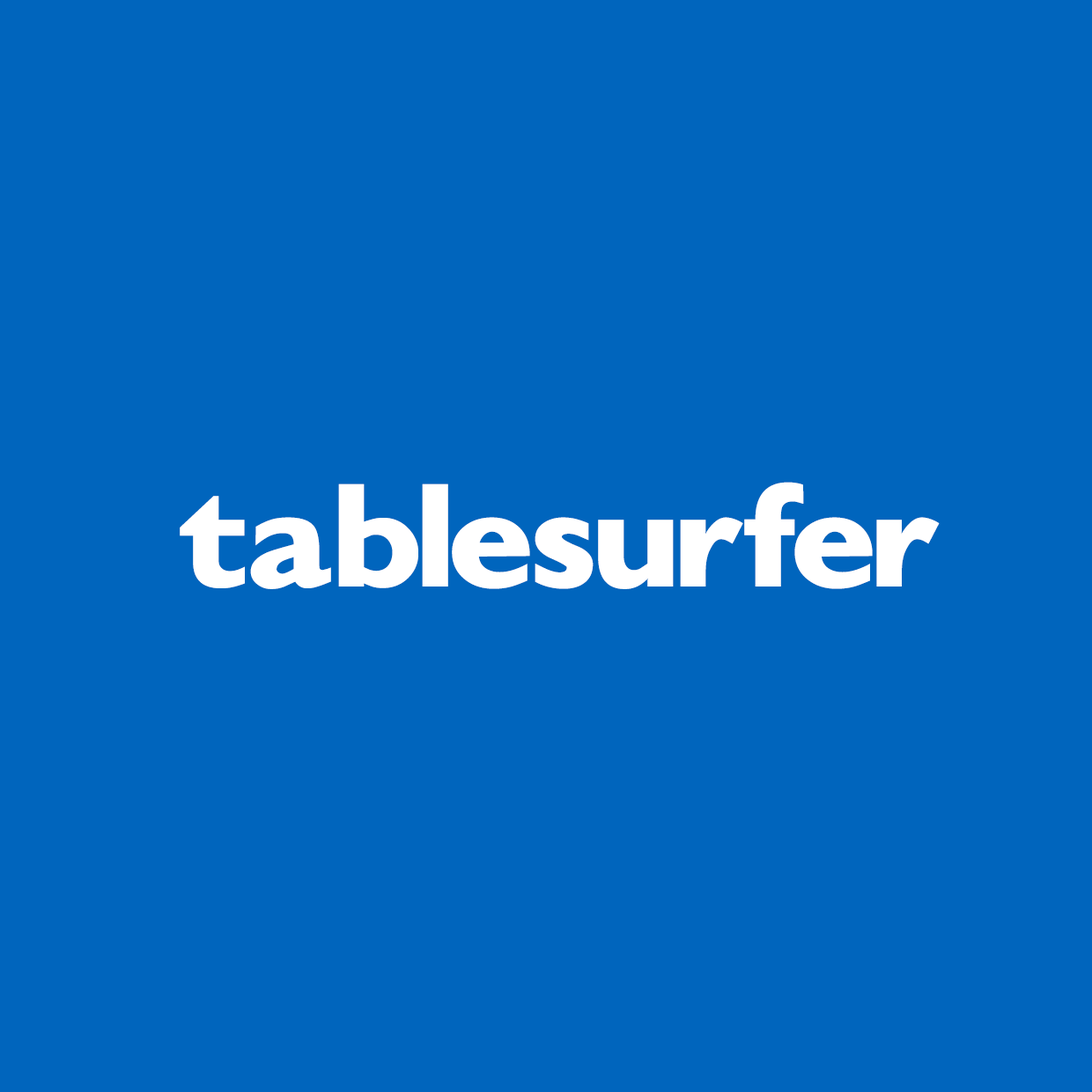
<style>
.page{position:relative;width:1092px;height:1092px;background:#0065bd}
.page>*{position:absolute;margin:0}
.t1{font:144.6px "Gibson-Bold";letter-spacing:-0.065em;color:#ffffff;scale:1.09 1}
.t2{font:144.6px "Gibson-Bold";letter-spacing:0.045em;color:#ffffff;scale:1.09 1}
.t3{font:144.6px "Gibson-Bold";letter-spacing:-0.01em;color:#ffffff;scale:1.09 1}
.t4{font:144.6px "Gibson-Bold";letter-spacing:-0.09em;color:#ffffff;scale:1.09 1}
.t5{font:144.6px "Gibson-Bold";letter-spacing:-0.05em;color:#ffffff;scale:1.09 1}
.t6{font:144.6px "Gibson-Bold";letter-spacing:-0.015em;color:#ffffff;scale:1.09 1}
.t7{font:144.6px "Gibson-Bold";letter-spacing:-0.04em;color:#ffffff;scale:1.09 1}
.t8{font:144.6px "Gibson-Bold";letter-spacing:-0.07em;color:#ffffff;scale:1.09 1}
.t9{font:144.6px "Gibson-Bold";letter-spacing:0.03em;color:#ffffff;scale:1.09 1}
.t10{font:144.6px "Gibson-Bold";letter-spacing:-0.035em;color:#ffffff;scale:1.09 1}
</style>
<div class="page">
<p class="t1" style="left:180px;top:482px;width:760px;height:107px"><span class="t2">t</span><span class="t3">a</span><span class="t4">b</span><span class="t5">l</span><span class="t6">e</span><span class="t7">s</span><span class="t8">u</span><span class="t9">r</span><span class="t10">f</span>er</p>
</div>
